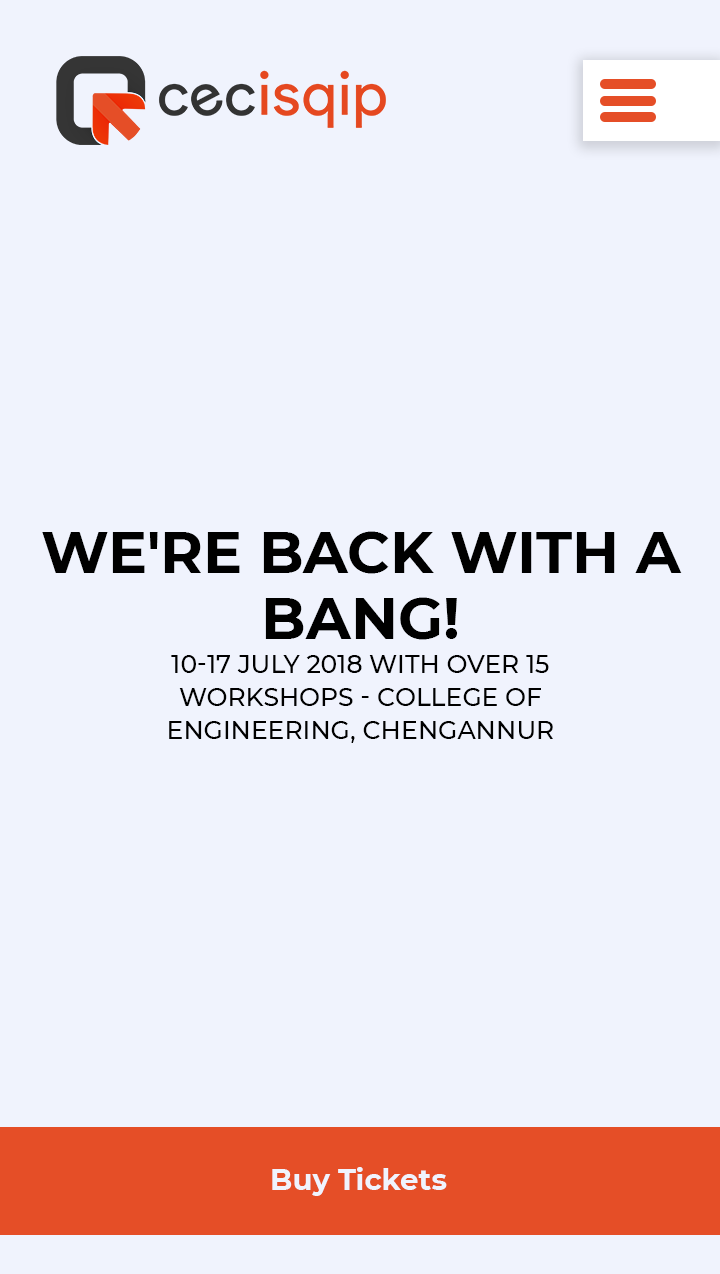
<style>
.page{position:relative;width:720px;height:1274px;background:#f0f3fd}
.page>*{position:absolute;margin:0}
.t1{font:25px/33.3px "Montserrat-Medium";color:#000000;text-transform:uppercase}
.t2{font:58.3px/66.7px "Montserrat-Bold";color:#000000;text-transform:uppercase}
.t3{font:29.2px "Montserrat-Bold";color:#f0f3fd}
</style>
<div class="page">
<p class="t1" style="left:42px;top:531px;width:640px;height:212px;text-align:center"><span class="t2">We're back with a <br>bang!<br></span>10-17 July 2018 with over 15 <br>workshops - College of <br>Engineering, Chengannur</p>
<p class="t3" style="left:272px;top:1167px;width:175px;height:29px">Buy Tickets</p>
</div>
